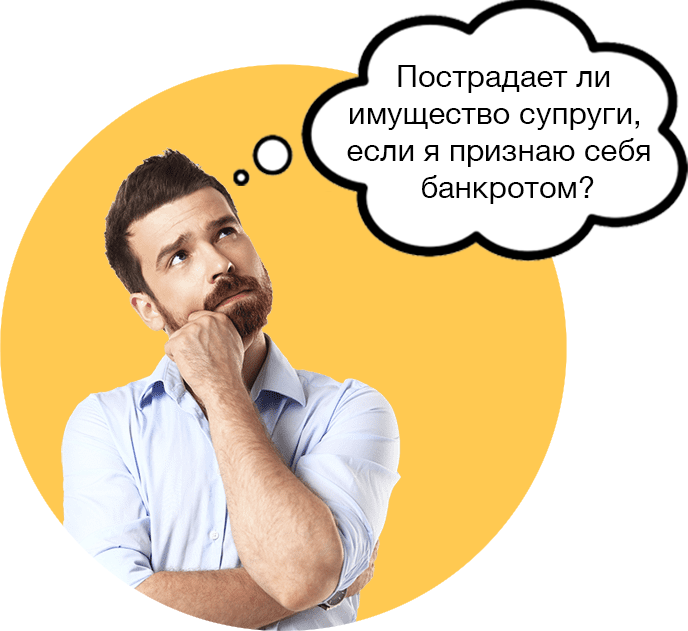
<style>
.page{position:relative;width:688px;height:631px;background:#ffffff}
.page>*{position:absolute;margin:0}
.t1{font:31px "HelveticaNeue";color:#000000}
</style>
<div class="page">
<p class="t1" style="left:347px;top:65px;width:303px;height:139px;text-align:center">Пострадает ли<br>имущество супруги,  <br>если я признаю себя <br> банкротом?</p>
</div>
